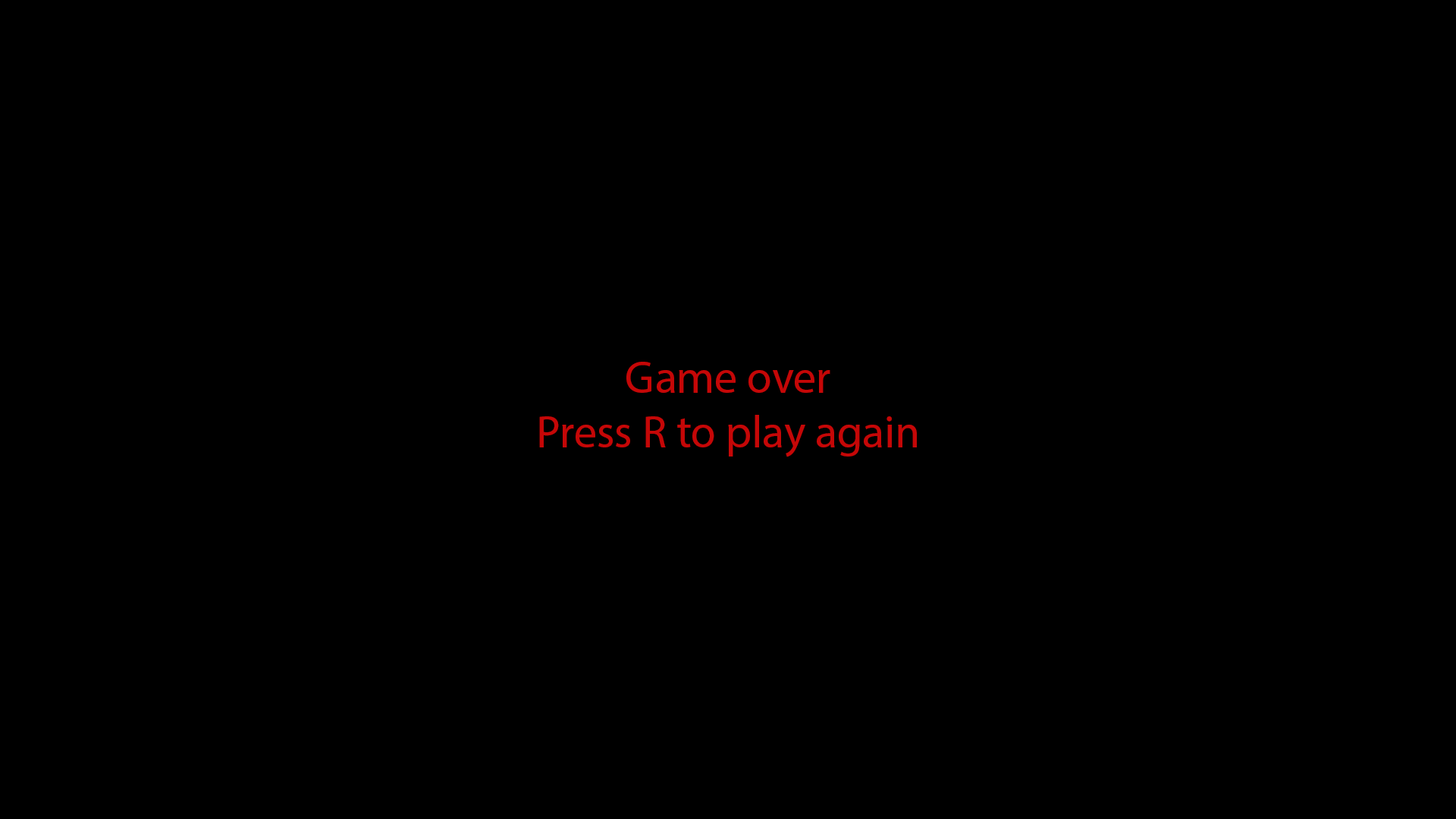
<style>
.page{position:relative;width:1456px;height:819px;background:#000000}
.page>*{position:absolute;margin:0}
.t1{font:45.5px "MyriadPro-Regular";color:#c50707}
</style>
<div class="page">
<p class="t1" style="left:539px;top:362px;width:378px;height:95px;text-align:center">Game over<br>Press R to play again</p>
</div>
